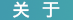
<style>
.page{position:relative;width:73px;height:20px}
.page>*{position:absolute;margin:0}
.t1{font:18px "LiHeiPro";color:#ffffff}
</style>
<div class="page">
<p class="t1" style="left:13px;top:1px;width:47px;height:17px">关  于</p>
</div>
